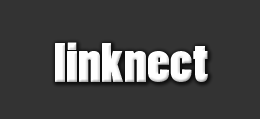
<style>
.page{position:relative;width:260px;height:119px;background:#333333}
.page>*{position:absolute;margin:0}
.t1{font:51px "PoplarStd";color:#ffffff;scale:1.2 1}
.t2{font:51px "PoplarStd";color:#fefefe;scale:1.2 1}
</style>
<div class="page">
<p class="t1" style="left:55px;top:42px;width:153px;height:40px">link<span class="t2">nect</span></p>
</div>
